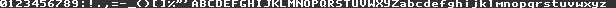
<style>
.page{position:relative;width:616px;height:8px;background:#333333}
.page>*{position:absolute;margin:0}
.t1{font:8px "DeluxeFontReg";color:#ffffff}
</style>
<div class="page">
<p class="t1" style="left:0px;top:0px;width:606px;height:8px">0123456789:!.,=-_()[]%”’ABCDEFGHIJKLMNOPQRSTUVWXYZabcdefghijklmnopqrstuvwxyz</p>
</div>
